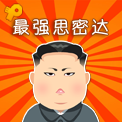
<style>
.page{position:relative;width:122px;height:122px}
.page>*{position:absolute;margin:0}
.t1{font:18px "YuppySC-Regular";letter-spacing:0.1em;color:#ffffff}
</style>
<div class="page">
<p class="t1" style="left:13px;top:19px;width:95px;height:16px">最强思密达</p>
</div>
